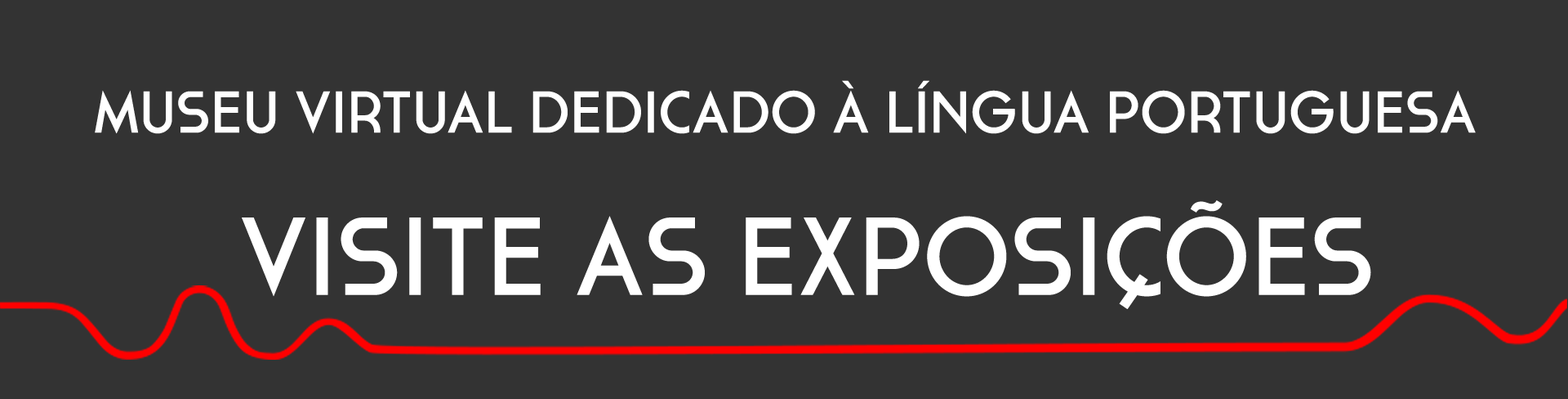
<style>
.page{position:relative;width:1568px;height:399px;background:#333333}
.page>*{position:absolute;margin:0}
.t1{font:58.8px "Cassannet-Regular";letter-spacing:0.01em;color:#ffffff}
.t2{font:110.1px "Cassannet-Regular";letter-spacing:0.01em;color:#ffffff}
</style>
<div class="page">
<p class="t1" style="left:95px;top:80px;width:1381px;height:54px">MUSEU VIRTUAL DEDICADO À LÍNGUA PORTUGUESA</p>
<p class="t2" style="left:242px;top:200px;width:1129px;height:109px">VISITE AS EXPOSIÇÕES</p>
</div>
